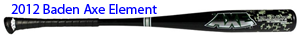
<style>
.page{position:relative;width:300px;height:35px;background:#ffffff}
.page>*{position:absolute;margin:0}
.t1{font:14px "MyriadPro-Regular";color:#0000ff}
</style>
<div class="page">
<p class="t1" style="left:11px;top:4px;width:146px;height:10px">2012 Baden Axe Element</p>
</div>
